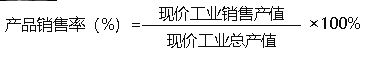
<style>
.page{position:relative;width:370px;height:57px;background:#ffffff}
.page>*{position:absolute;margin:0}
.t1{font:16px "MicrosoftYaHei";letter-spacing:-0.005em;color:#0d0d0d}
</style>
<div class="page">
<p class="t1" style="left:159px;top:6px;width:125px;height:15px">现价工业销售产值</p>
<p class="t1" style="left:5px;top:16px;width:135px;height:17px">产品销售率（%）=</p>
<p class="t1" style="left:310px;top:17px;width:50px;height:12px">×100%</p>
<p class="t1" style="left:167px;top:33px;width:109px;height:15px">现价工业总产值</p>
</div>
